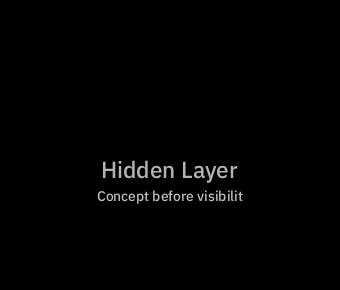
<style>
.page{position:relative;width:340px;height:290px;background:#000000}
.page>*{position:absolute;margin:0}
.t1{font:23.1px "IBMPlexSans-Medium";color:#b3b3b3}
.t2{font:14.1px "IBMPlexSans-Medium";color:#bababc}
</style>
<div class="page">
<p class="t1" style="left:102px;top:160px;width:136px;height:23px">Hidden Layer</p>
<p class="t2" style="left:97px;top:190px;width:146px;height:14px">Concept before visibilit</p>
</div>
